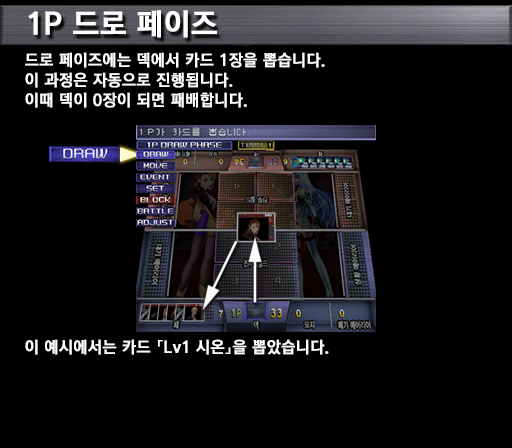
<style>
.page{position:relative;width:512px;height:448px;background:#000000}
.page>*{position:absolute;margin:0}
.t1{font:30px "KoreanGD15-R";color:#ffffff;font-weight:bold}
.t2{font:16px/20px "KoreanGD15-R";color:#ffffff;font-weight:bold}
.t3{font:16px "KoreanGD15-R";color:#ffffff;font-weight:bold}
</style>
<div class="page">
<p class="t1" style="left:28px;top:10px;width:189px;height:28px">1P 드로 페이즈</p>
<p class="t2" style="left:25px;top:52px;width:300px;height:56px">드로 페이즈에는 덱에서 카드 1장을 뽑습니다.<br>이 과정은 자동으로 진행됩니다.<br>이때 덱이 0장이 되면 패배합니다.</p>
<p class="t3" style="left:25px;top:339px;width:304px;height:16px">이 예시에서는 카드 「Lv1 시온」을 뽑았습니다.</p>
</div>
